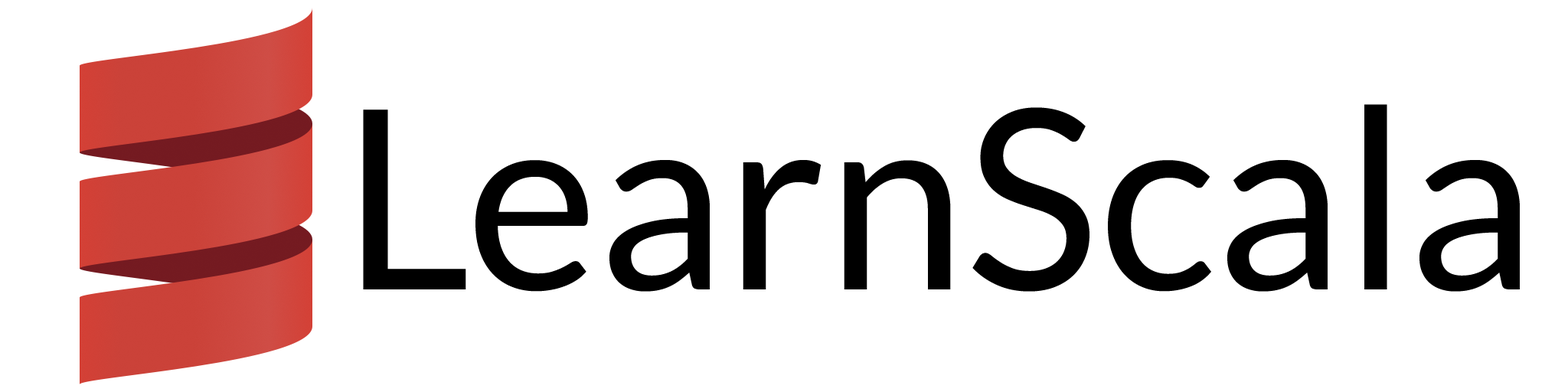
<style>
.page{position:relative;width:1568px;height:392px;background:#ffffff}
.page>*{position:absolute;margin:0}
.t1{font:250.9px "Lato-Regular";color:#000000}
</style>
<div class="page">
<p class="t1" style="left:363px;top:104px;width:1157px;height:188px">LearnScala</p>
</div>
